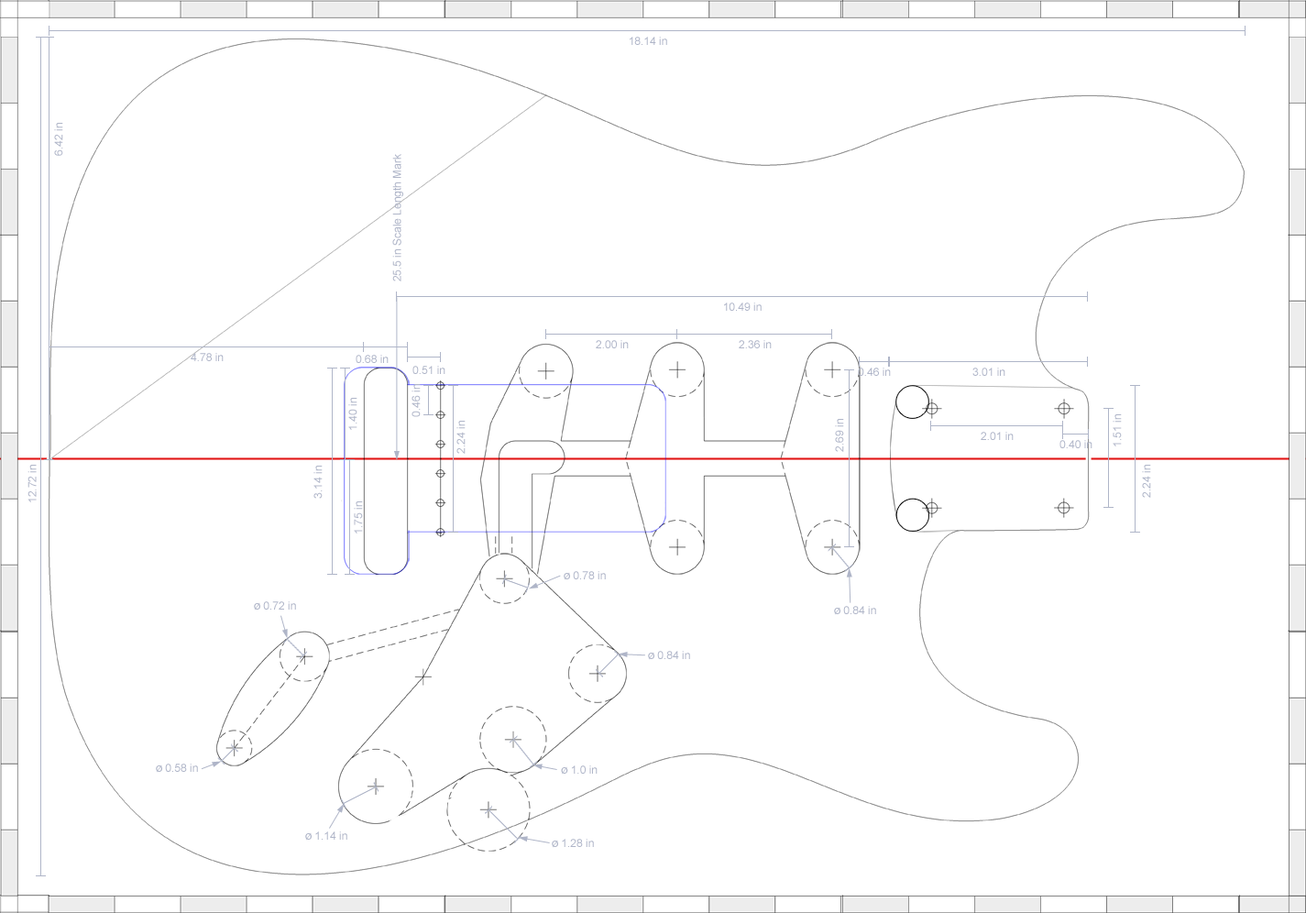
<style>
.page{position:relative;width:1306px;height:913px;background:#ffffff}
.page>*{position:absolute;margin:0}
.t1{font:11px "ArialMT";color:#afb5c8}
.t2{font:12.8px "MyriadPro-Regular";color:#afb5c8}
</style>
<div class="page">
<p class="t1" style="left:630px;top:37px;width:37px;height:8px">18.14 in</p>
<p class="t1" style="left:54px;top:123px;width:9px;height:33px;rotate:-90deg">6.42 in</p>
<p class="t1" style="left:392px;top:154px;width:11px;height:127px;rotate:-90deg">25.5 in Scale Length Mark</p>
<p class="t1" style="left:724px;top:302px;width:38px;height:9px">10.49 in</p>
<p class="t1" style="left:596px;top:340px;width:33px;height:8px">2.00 in</p>
<p class="t1" style="left:739px;top:340px;width:33px;height:8px">2.36 in</p>
<p class="t1" style="left:191px;top:353px;width:33px;height:8px">4.78 in</p>
<p class="t1" style="left:356px;top:355px;width:33px;height:8px">0.68 in</p>
<p class="t1" style="left:412px;top:366px;width:33px;height:8px">0.51 in</p>
<p class="t1" style="left:858px;top:368px;width:33px;height:8px">0.46 in</p>
<p class="t1" style="left:973px;top:368px;width:33px;height:8px">3.01 in</p>
<p class="t1" style="left:412px;top:384px;width:9px;height:33px;rotate:-90deg">0.46 in</p>
<p class="t1" style="left:348px;top:398px;width:9px;height:32px;rotate:-90deg">1.40 in</p>
<p class="t1" style="left:456px;top:421px;width:10px;height:33px;rotate:-90deg">2.24 in</p>
<p class="t1" style="left:835px;top:419px;width:9px;height:33px;rotate:-90deg">2.69 in</p>
<p class="t1" style="left:1113px;top:414px;width:9px;height:32px;rotate:-90deg">1.51 in</p>
<p class="t1" style="left:981px;top:432px;width:33px;height:8px">2.01 in</p>
<p class="t1" style="left:1060px;top:440px;width:33px;height:8px">0.40 in</p>
<p class="t1" style="left:27px;top:465px;width:10px;height:37px;rotate:-90deg">12.72 in</p>
<p class="t1" style="left:313px;top:466px;width:10px;height:33px;rotate:-90deg">3.14 in</p>
<p class="t1" style="left:1142px;top:465px;width:9px;height:33px;rotate:-90deg">2.24 in</p>
<p class="t1" style="left:354px;top:501px;width:9px;height:32px;rotate:-90deg">1.75 in</p>
<p class="t1" style="left:564px;top:571px;width:42px;height:9px"><span class="t2">ø </span>0.78 in</p>
<p class="t1" style="left:254px;top:601px;width:42px;height:9px"><span class="t2">ø </span>0.72 in</p>
<p class="t1" style="left:834px;top:606px;width:42px;height:9px"><span class="t2">ø </span>0.84 in</p>
<p class="t1" style="left:648px;top:651px;width:42px;height:9px"><span class="t2">ø </span>0.84 in</p>
<p class="t1" style="left:156px;top:764px;width:42px;height:9px"><span class="t2">ø </span>0.58 in</p>
<p class="t1" style="left:561px;top:765px;width:37px;height:10px"><span class="t2">ø </span>1.0 in</p>
<p class="t1" style="left:305px;top:831px;width:42px;height:10px"><span class="t2">ø </span>1.14 in</p>
<p class="t1" style="left:552px;top:839px;width:42px;height:9px"><span class="t2">ø </span>1.28 in</p>
</div>
